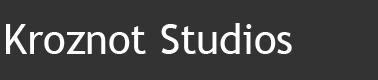
<style>
.page{position:relative;width:378px;height:80px;background:#333333}
.page>*{position:absolute;margin:0}
.t1{font:41.7px "TrebuchetMS";color:#ffffff}
</style>
<div class="page">
<p class="t1" style="left:6px;top:23px;width:286px;height:31px">Kroznot Studios</p>
</div>
